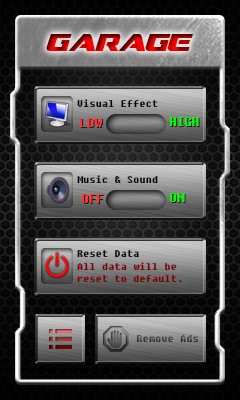
<style>
.page{position:relative;width:240px;height:400px}
.page>*{position:absolute;margin:0}
.t1{font:24px "DreamMMA"}
.t2{font:10px "Fixedsys";color:#000000}
.t3{font:12px "Fixedsys";color:#ff3535}
.t4{font:12px "Fixedsys";color:#00ff00}
.t5{font:10px "Fixedsys";color:#7a0000}
.t6{font:10px "Fixedsys"}
</style>
<div class="page">
<p class="t1" style="left:46px;top:34px;width:148px;height:17px">garage</p>
<p class="t2" style="left:77px;top:99px;width:81px;height:8px">Visual Effect</p>
<p class="t3" style="left:79px;top:118px;width:24px;height:9px">LOW</p>
<p class="t4" style="left:169px;top:117px;width:30px;height:9px">HIGH</p>
<p class="t2" style="left:77px;top:175px;width:81px;height:8px">Music &amp; Sound</p>
<p class="t3" style="left:81px;top:194px;width:23px;height:9px">OFF</p>
<p class="t4" style="left:169px;top:193px;width:16px;height:9px">ON</p>
<p class="t2" style="left:77px;top:250px;width:62px;height:7px">Reset Data</p>
<p class="t5" style="left:77px;top:262px;width:105px;height:20px">All data will be<br>reset to default.</p>
<p class="t6" style="left:137px;top:335px;width:62px;height:7px">Remove Ads</p>
</div>
